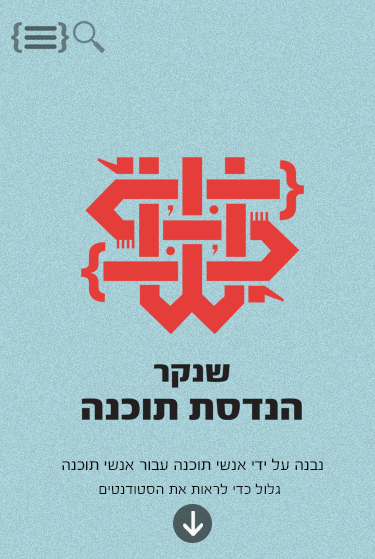
<style>
.page{position:relative;width:375px;height:559px}
.page>*{position:absolute;margin:0}
.t1{font:16.7px "FbScorpion-Regular";color:#0d0d0d}
.t2{font:15.3px "FbScorpion-Regular";color:#0d0d0d}
</style>
<div class="page">
<p class="t1" style="left:62px;top:458px;width:261px;height:12px">הנכות ישנא רובע הנכות ישנא ידי לע הנבנ</p>
<p class="t2" style="left:99px;top:483px;width:182px;height:12px">םיטנדוטסה תא תוארל ידכ לולג</p>
</div>
